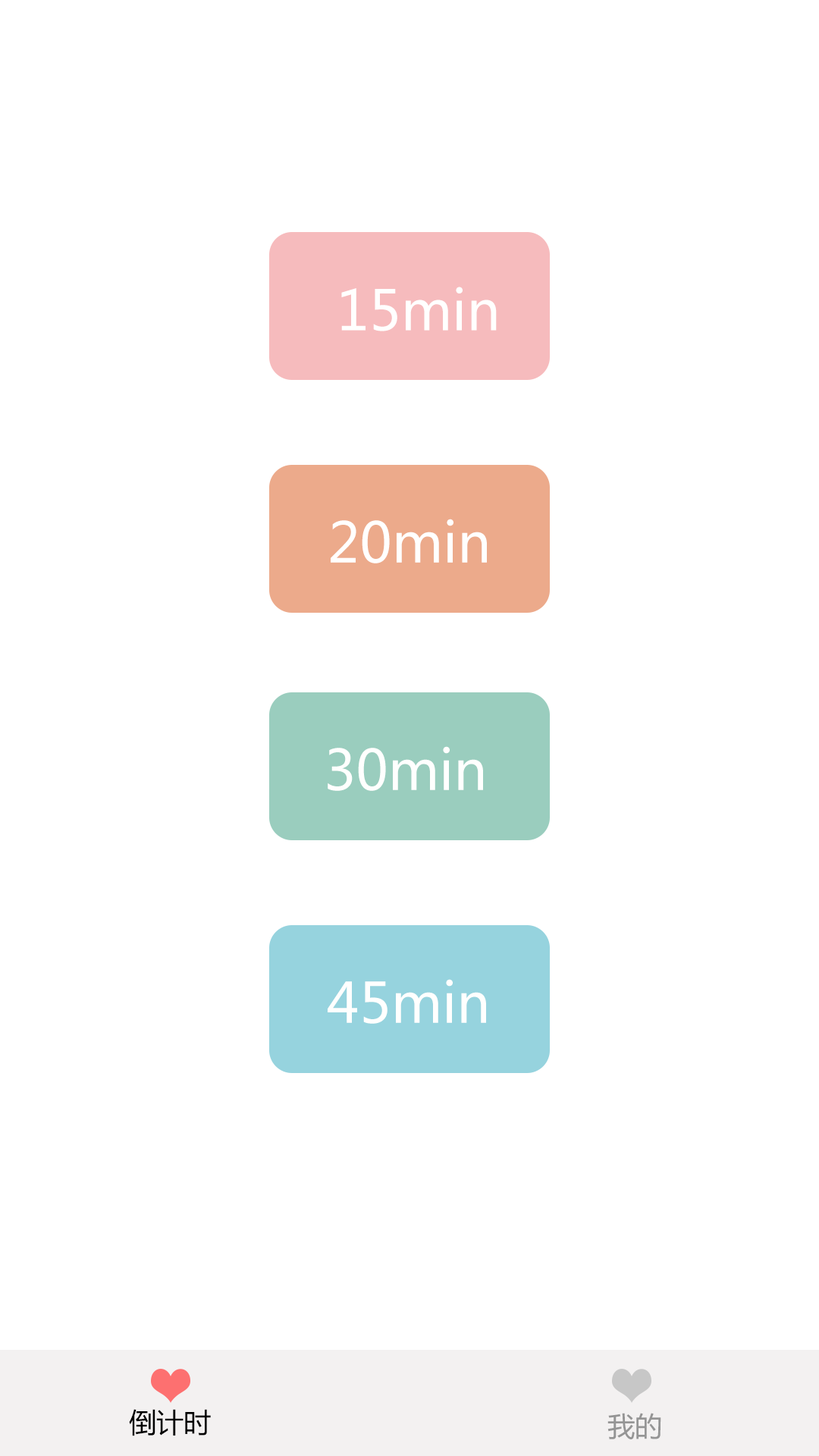
<style>
.page{position:relative;width:819px;height:1456px;background:#ffffff}
.page>*{position:absolute;margin:0}
.t1{font:54.6px "MicrosoftYaHei";color:#fffffe}
.t2{font:27.3px "MicrosoftYaHei";color:#000000}
.t3{font:27.3px "MicrosoftYaHei";color:#959595}
</style>
<div class="page">
<p class="t1" style="left:341px;top:287px;width:156px;height:44px">15min</p>
<p class="t1" style="left:331px;top:519px;width:156px;height:44px">20min</p>
<p class="t1" style="left:328px;top:746px;width:155px;height:45px">30min</p>
<p class="t1" style="left:328px;top:979px;width:158px;height:45px">45min</p>
<p class="t2" style="left:129px;top:1409px;width:82px;height:27px">倒计时</p>
<p class="t3" style="left:607px;top:1413px;width:54px;height:26px">我的</p>
</div>
